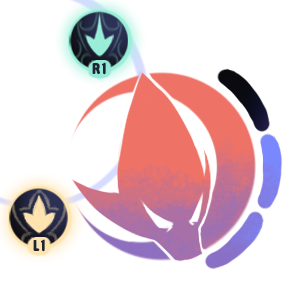
<style>
.page{position:relative;width:300px;height:300px;background:#ffffff}
.page>*{position:absolute;margin:0}
.t1{font:15.7px "AlphabetSoupPro";letter-spacing:0.12em;color:#1c2437}
.t2{font:15.8px "AlphabetSoupPro";letter-spacing:0.12em;color:#1c2437}
</style>
<div class="page">
<p class="t1" style="left:92px;top:62px;width:14px;height:13px">R1</p>
<p class="t2" style="left:33px;top:239px;width:12px;height:13px">l1</p>
</div>
